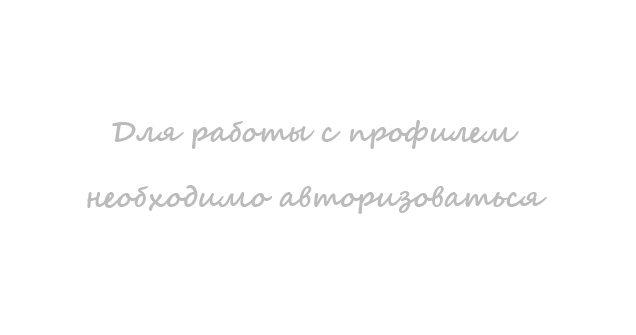
<style>
.page{position:relative;width:636px;height:335px;background:#ffffff}
.page>*{position:absolute;margin:0}
.t1{font:28.6px/65px "SegoeScript-Bold";color:#bbbbbb}
</style>
<div class="page">
<p class="t1" style="left:87px;top:120px;width:460px;height:94px;text-align:center">Для работы с профилем<br>необходимо авторизоваться</p>
</div>
